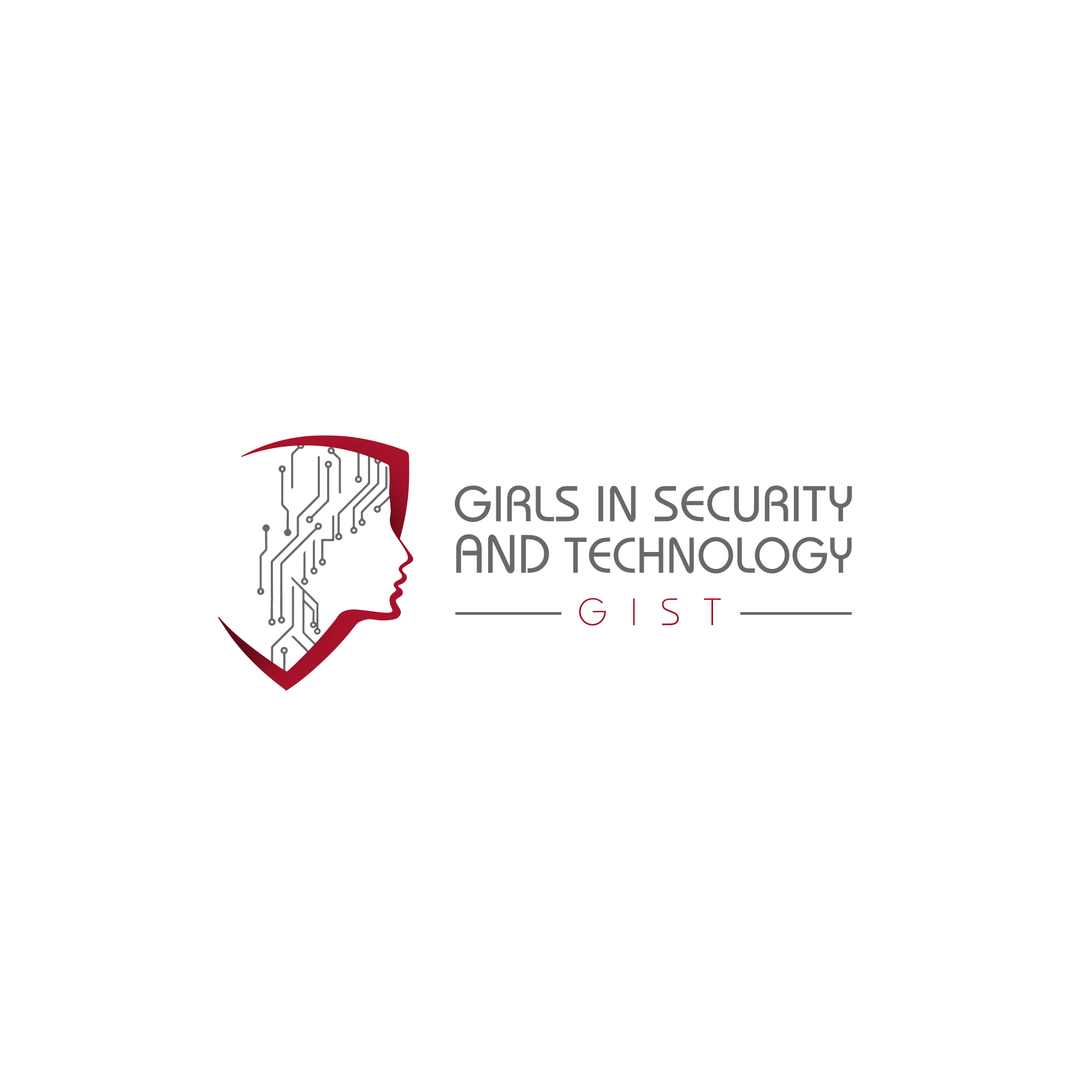
<style>
.page{position:relative;width:1092px;height:1092px;background:#ffffff}
.page>*{position:absolute;margin:0}
.t1{font:50.3px "BauhausITCbyBT-Medium";letter-spacing:0.004em;color:#696969;text-transform:uppercase}
.t2{font:54.1px/51.4px "BauhausITCbyBT-Medium";color:#696969;text-transform:uppercase;scale:0.97 1}
.t3{font:50.3px/51.4px "BauhausITCbyBT-Medium";color:#696969;text-transform:uppercase;scale:0.97 1}
.t4{font:38.2px "BauhausITCbyBT-Light";letter-spacing:0.6em;color:#a7132a}
</style>
<div class="page">
<p class="t1" style="left:455px;top:485px;width:397px;height:89px">Girls in Security<br><span class="t2">and</span><span class="t3"> Technology</span></p>
<p class="t4" style="left:579px;top:598px;width:142px;height:28px">GIST</p>
</div>
